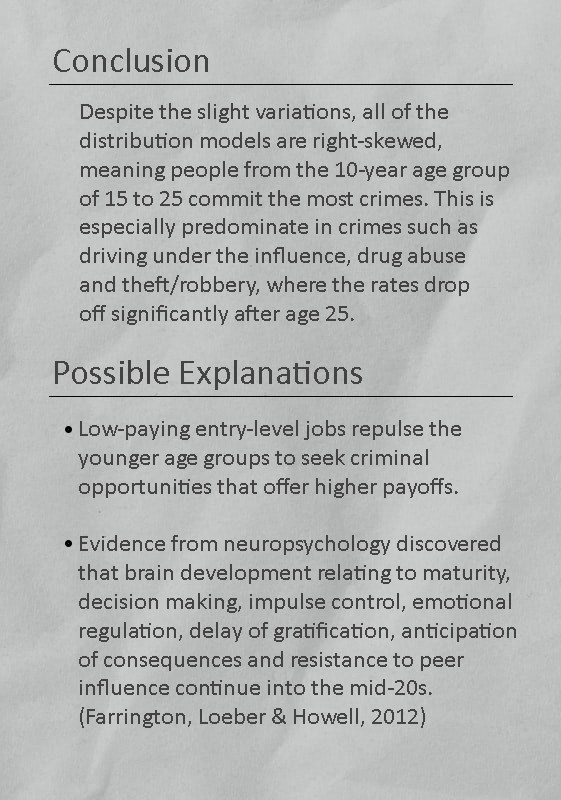
<style>
.page{position:relative;width:561px;height:800px}
.page>*{position:absolute;margin:0}
.t1{font:36px "Calibri";color:#434343}
.t2{font:24px "Calibri";color:#434343}
</style>
<div class="page">
<p class="t1" style="left:54px;top:48px;width:154px;height:24px">Conclusion</p>
<p class="t2" style="left:80px;top:103px;width:429px;height:222px">Despite the slight variations, all of the <br>distribution models are right-skewed, <br>meaning people from the 10-year age group <br>of 15 to 25 commit the most crimes. This is <br>especially predominate in crimes such as <br>driving under the influence, drug abuse <br>and theft/robbery, where the rates drop<br>off significantly after age 25.</p>
<p class="t1" style="left:55px;top:360px;width:307px;height:30px">Possible Explanations</p>
<p class="t2" style="left:78px;top:420px;width:438px;height:308px">Low-paying entry-level jobs repulse the <br>younger age groups to seek criminal <br>opportunities that offer higher payoffs.<br><br>Evidence from neuropsychology discovered <br>that brain development relating to maturity, <br>decision making, impulse control, emotional <br>regulation, delay of gratification, anticipation <br>of consequences and resistance to peer <br>influence continue into the mid-20s.<br>(Farrington, Loeber &amp; Howell, 2012)</p>
</div>
